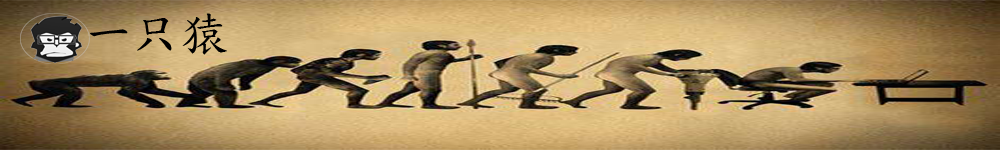
<style>
.page{position:relative;width:1000px;height:150px}
.page>*{position:absolute;margin:0}
.t1{font:48px "DFKaiShu-SB-Estd-BF";color:#000000}
</style>
<div class="page">
<p class="t1" style="left:90px;top:13px;width:137px;height:42px">一只猿</p>
</div>
